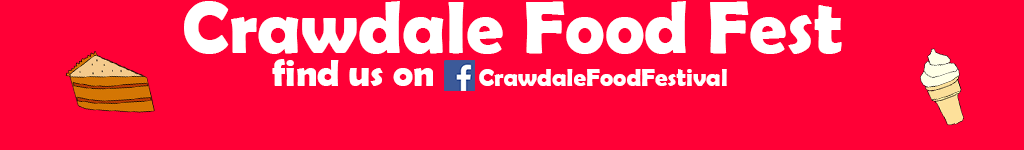
<style>
.page{position:relative;width:1024px;height:150px;background:#ff0036}
.page>*{position:absolute;margin:0}
.t1{font:75px "BerlinSansFBDemi-Bold";color:#ffffff}
.t2{font:37.5px "BerlinSansFBDemi-Bold";color:#ffffff}
.t3{font:25px "BerlinSansFBDemi-Bold";color:#ffffff}
</style>
<div class="page">
<p class="t1" style="left:184px;top:1px;width:658px;height:53px">Crawdale Food Fest</p>
<p class="t2" style="left:272px;top:59px;width:161px;height:27px">find us on</p>
<p class="t3" style="left:479px;top:69px;width:248px;height:17px">CrawdaleFoodFestival</p>
</div>
